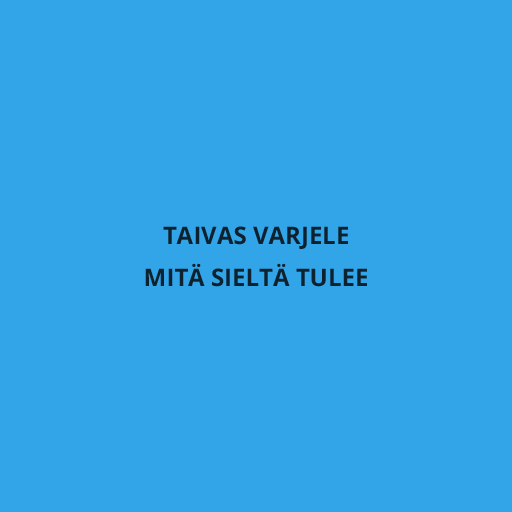
<style>
.page{position:relative;width:512px;height:512px;background:#31a5e8}
.page>*{position:absolute;margin:0}
.t1{font:24px/24px "OpenSans-Bold";color:#0d222e}
</style>
<div class="page">
<p class="t1" style="left:145px;top:226px;width:222px;height:61px;text-align:center">TAIVAS VARJELE<br>MITÄ SIELTÄ TULEE</p>
</div>
